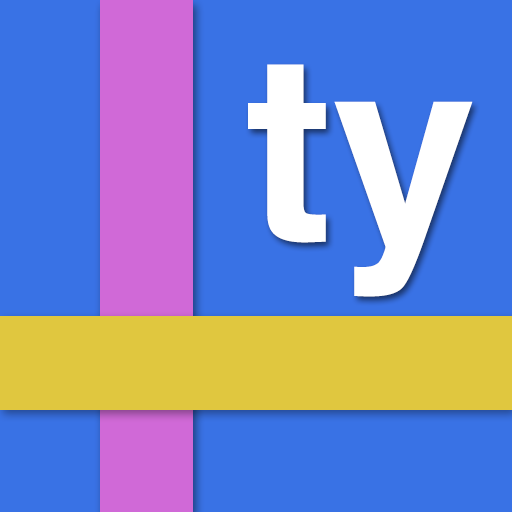
<style>
.page{position:relative;width:512px;height:512px;background:#3972e5}
.page>*{position:absolute;margin:0}
.t1{font:260px "Helvetica-Bold";color:#ffffff}
</style>
<div class="page">
<p class="t1" style="left:248px;top:64px;width:225px;height:233px">ty</p>
</div>
